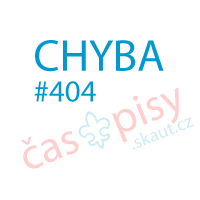
<style>
.page{position:relative;width:200px;height:200px;background:#ffffff}
.page>*{position:absolute;margin:0}
.t1{font:44.9px/2.8px "MyriadPro-Regular";color:#0098cf}
.t2{font:30.9px/2.8px "MyriadPro-Regular";color:#0098cf}
.t3{font:44.9px "MyriadPro-Regular";color:#ffcfcf}
.t4{font:18.7px "MyriadPro-Regular";color:#cfecf6}
</style>
<div class="page">
<p class="t1" style="left:34px;top:40px;width:130px;height:62px">CHYBA<br><br><br><br><br><br><br><br><br><br><br><span class="t2">#404</span></p>
<p class="t3" style="left:20px;top:87px;width:159px;height:82px;rotate:-22deg">čas    pisy</p>
<p class="t4" style="left:133px;top:117px;width:61px;height:33px;rotate:-22deg">.skaut.cz</p>
</div>
